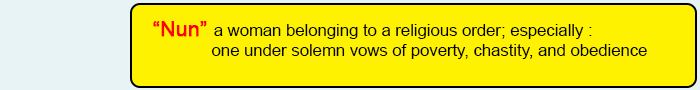
<style>
.page{position:relative;width:700px;height:90px;background:#fff200}
.page>*{position:absolute;margin:0}
.t1{font:16.7px "ArialMT";color:#020202}
.t2{font:20.8px "ArialMT";color:#fd010d;font-weight:bold}
</style>
<div class="page">
<p class="t1" style="left:153px;top:21px;width:494px;height:38px"><span class="t2">“Nun” </span>a woman belonging to a religious order; especially :  <br>      one under solemn vows of poverty, chastity, and obedience</p>
</div>
